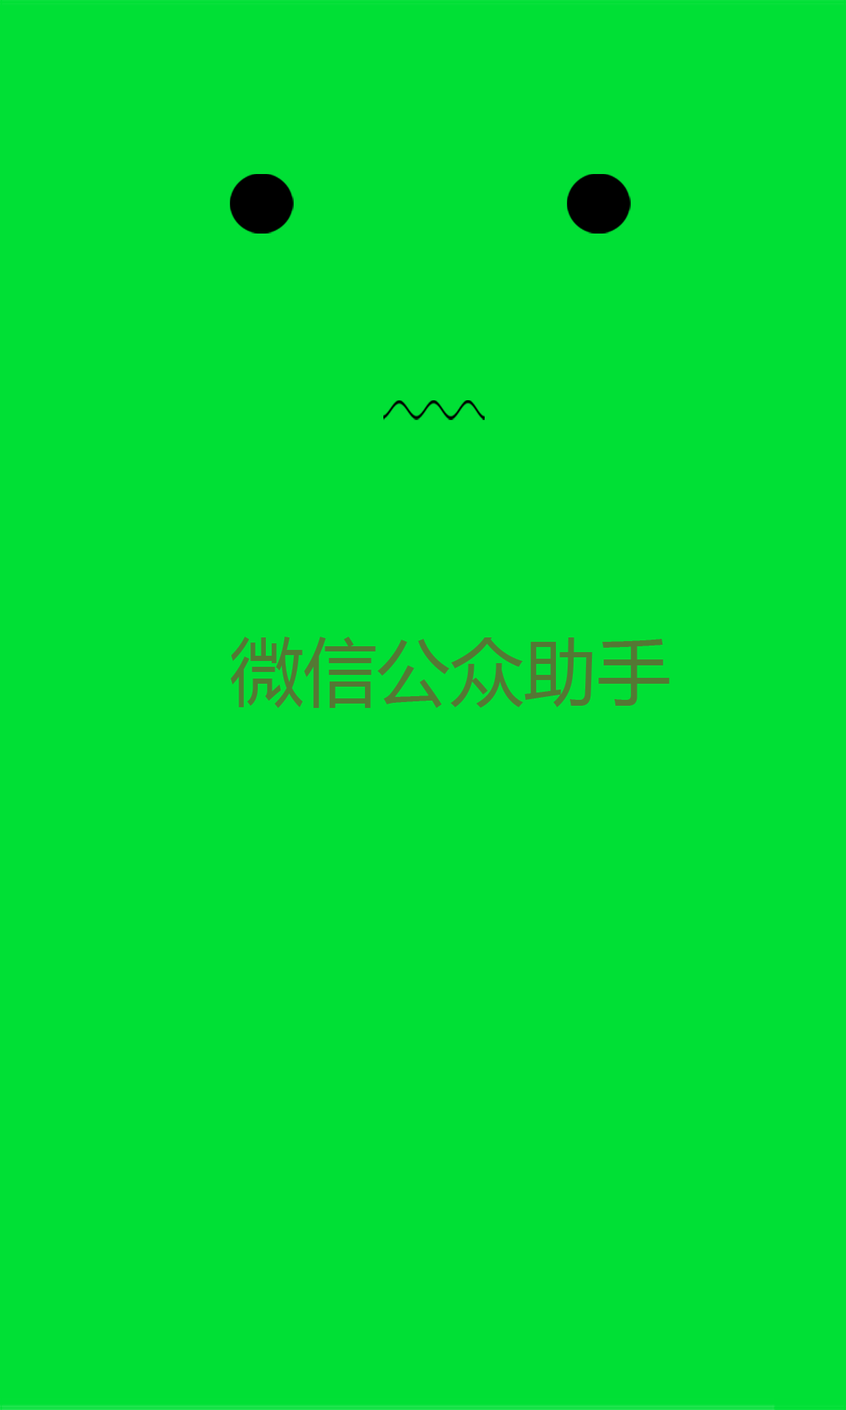
<style>
.page{position:relative;width:846px;height:1410px;background:#00e035}
.page>*{position:absolute;margin:0}
.t1{font:73.4px "MicrosoftYaHei";color:#547834}
</style>
<div class="page">
<p class="t1" style="left:231px;top:637px;width:439px;height:71px">微信公众助手</p>
</div>
